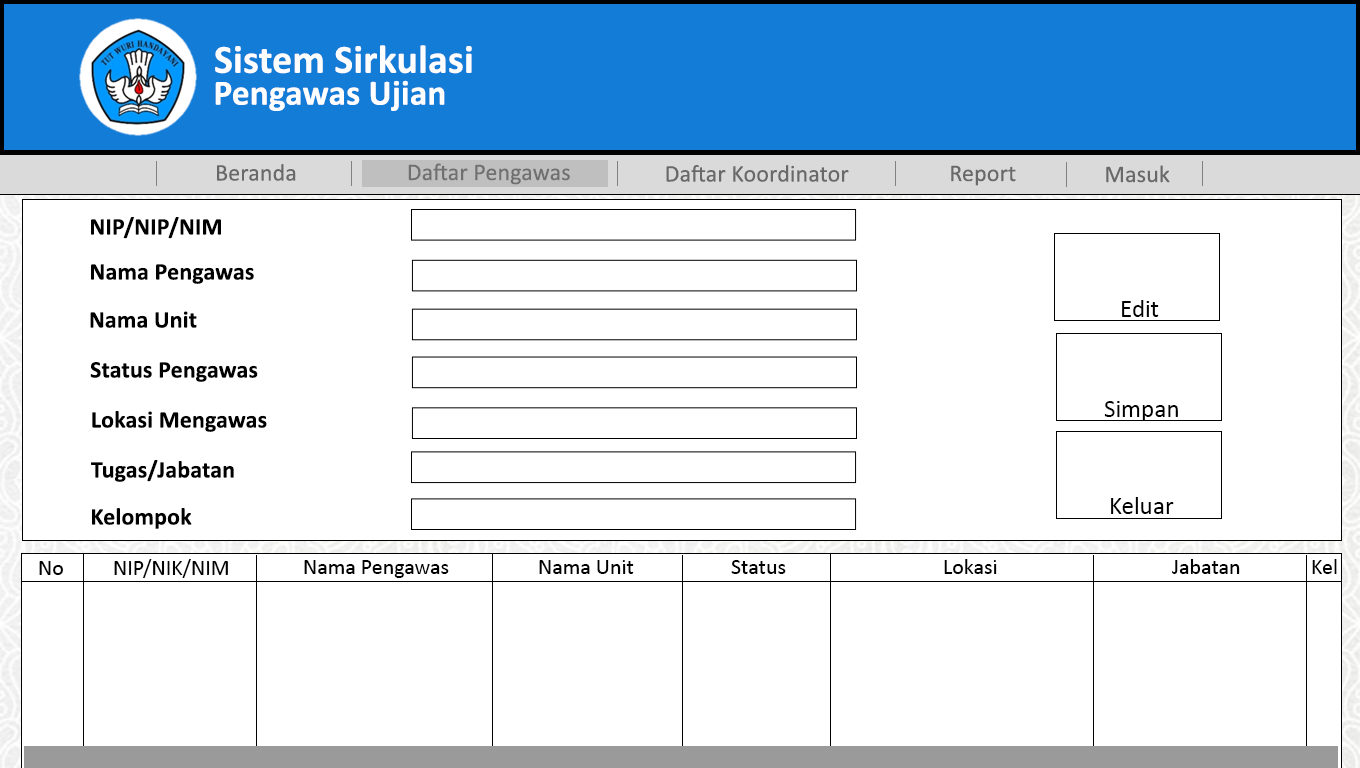
<style>
.page{position:relative;width:1360px;height:768px;background:#ffffff}
.page>*{position:absolute;margin:0}
.t1{font:40.1px "Calibri-Bold";letter-spacing:0.005em;color:#fdfdfd}
.t2{font:35.6px "Calibri-Bold";letter-spacing:0.005em;color:#fffefe}
.t3{font:24px "Calibri";letter-spacing:0.005em;color:#6a6969}
.t4{font:24px "Calibri-Bold";letter-spacing:0.005em;color:#000000}
.t5{font:25px "Calibri";color:#000000}
.t6{font:22px "Calibri";color:#000000}
</style>
<div class="page">
<p class="t1" style="left:215px;top:45px;width:257px;height:29px">Sistem Sirkulasi</p>
<p class="t2" style="left:215px;top:80px;width:230px;height:31px">Pengawas Ujian</p>
<p class="t3" style="left:217px;top:164px;width:79px;height:17px">Beranda</p>
<p class="t3" style="left:408px;top:163px;width:162px;height:22px">Daftar Pengawas</p>
<p class="t3" style="left:666px;top:165px;width:183px;height:17px">Daftar Koordinator</p>
<p class="t3" style="left:951px;top:165px;width:65px;height:21px">Report</p>
<p class="t3" style="left:1106px;top:165px;width:64px;height:18px">Masuk</p>
<p class="t4" style="left:91px;top:217px;width:130px;height:22px">NIP/NIP/NIM</p>
<p class="t4" style="left:91px;top:264px;width:163px;height:20px">Nama Pengawas</p>
<p class="t5" style="left:1122px;top:300px;width:37px;height:17px">Edit</p>
<p class="t4" style="left:90px;top:311px;width:107px;height:17px">Nama Unit</p>
<p class="t4" style="left:90px;top:362px;width:168px;height:20px">Status Pengawas</p>
<p class="t5" style="left:1104px;top:401px;width:74px;height:20px">Simpan</p>
<p class="t4" style="left:92px;top:411px;width:175px;height:21px">Lokasi Mengawas</p>
<p class="t4" style="left:91px;top:460px;width:143px;height:22px">Tugas/Jabatan</p>
<p class="t5" style="left:1111px;top:497px;width:63px;height:17px">Keluar</p>
<p class="t4" style="left:92px;top:508px;width:100px;height:21px">Kelompok</p>
<p class="t6" style="left:39px;top:561px;width:24px;height:14px">No</p>
<p class="t6" style="left:114px;top:559px;width:114px;height:19px">NIP/NIK/NIM</p>
<p class="t6" style="left:304px;top:560px;width:145px;height:18px">Nama Pengawas</p>
<p class="t6" style="left:539px;top:560px;width:95px;height:14px">Nama Unit</p>
<p class="t6" style="left:731px;top:560px;width:55px;height:14px">Status</p>
<p class="t6" style="left:944px;top:559px;width:53px;height:15px">Lokasi</p>
<p class="t6" style="left:1172px;top:559px;width:68px;height:15px">Jabatan</p>
<p class="t6" style="left:1312px;top:559px;width:25px;height:15px">Kel</p>
</div>
